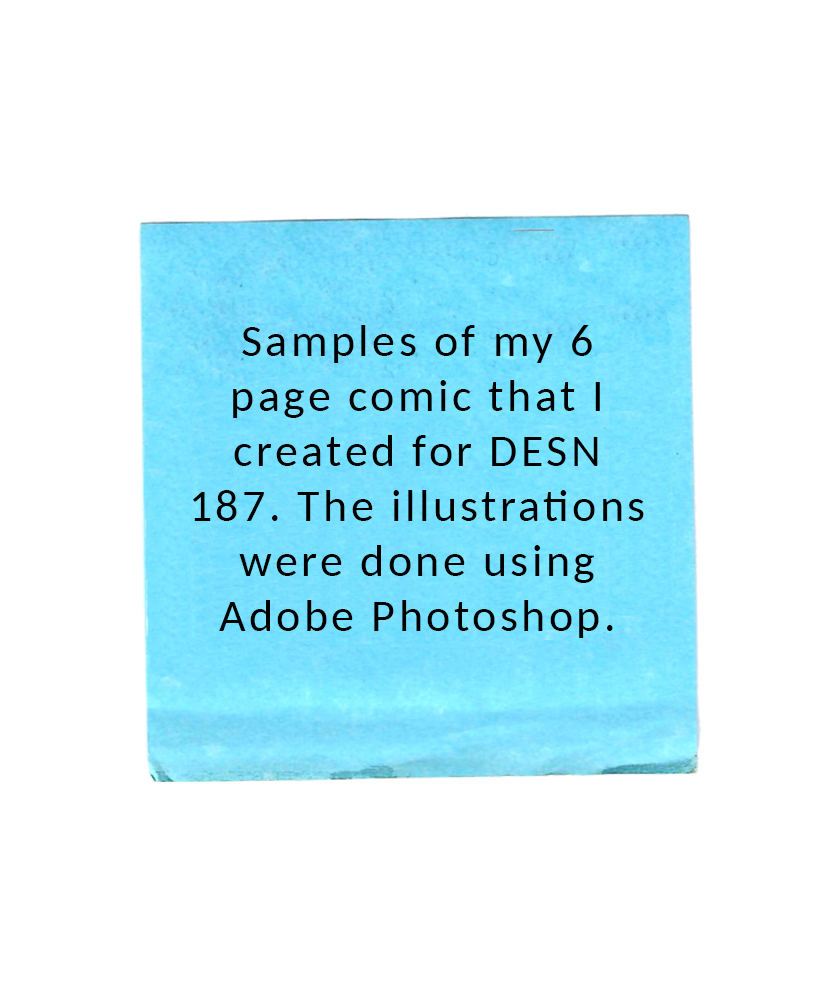
<style>
.page{position:relative;width:837px;height:992px;background:#ffffff}
.page>*{position:absolute;margin:0}
.t1{font:45.8px "Carlito-Regular";letter-spacing:0.075em;color:#000000}
</style>
<div class="page">
<p class="t1" style="left:193px;top:325px;width:451px;height:313px;text-align:center">Samples of my 6 page comic that I created for DESN 187. The illustrations were done using Adobe Photoshop.</p>
</div>
